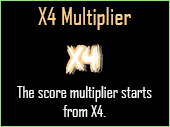
<style>
.page{position:relative;width:170px;height:127px;background:#000000}
.page>*{position:absolute;margin:0}
.t1{font:24px "AgencyFB-Reg";color:#ffd28c}
.t2{font:16px "AgencyFB-Reg";color:#ffffff}
</style>
<div class="page">
<p class="t1" style="left:38px;top:7px;width:93px;height:23px">X4 Multiplier</p>
<p class="t2" style="left:17px;top:86px;width:135px;height:31px;text-align:center">The score multiplier starts from X4.</p>
</div>
